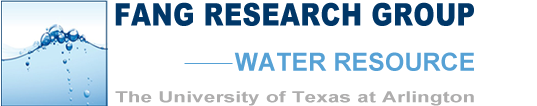
<style>
.page{position:relative;width:537px;height:106px;background:#ffffff}
.page>*{position:absolute;margin:0}
.t1{font:31.1px "Arial-Black";letter-spacing:0.01em;color:#003768;scale:0.83 1}
.t2{font:25px "Arial-BoldMT";letter-spacing:0.01em;color:#56a1d5}
.t3{font:15.3px "Arial-BoldMT";letter-spacing:0.01em;color:#aeadad;scale:1.35 1}
</style>
<div class="page">
<p class="t1" style="left:115px;top:2px;width:359px;height:24px">FANG RESEARCH GROUP</p>
<p class="t2" style="left:234px;top:52px;width:240px;height:19px">WATER RESOURCE</p>
<p class="t3" style="left:115px;top:91px;width:359px;height:15px">The University of Texas at Arlington</p>
</div>
